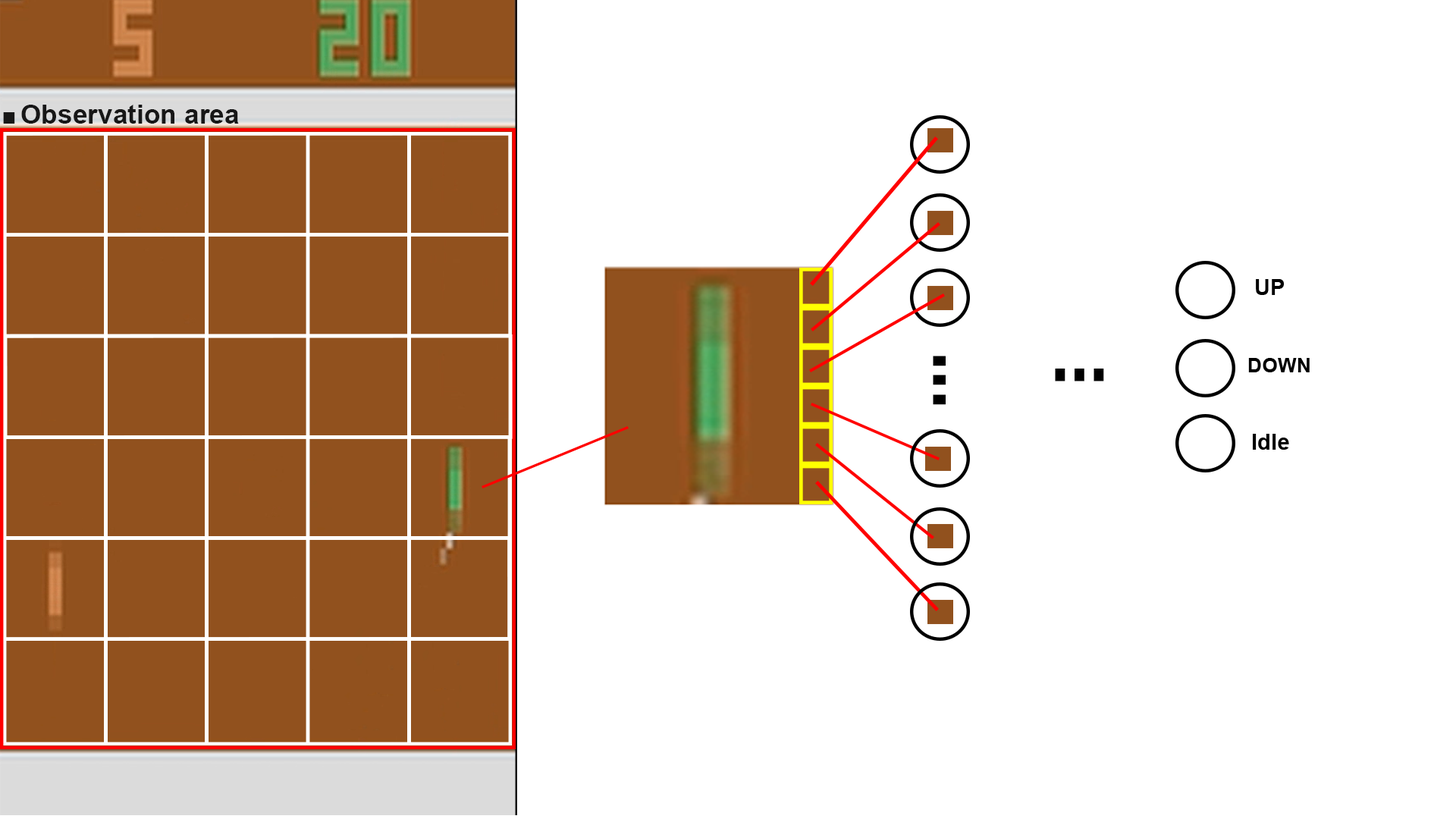
<style>
.page{position:relative;width:1456px;height:819px;background:#ffffff}
.page>*{position:absolute;margin:0}
.t1{font:26.8px "Arial-BoldMT";color:#171717}
.t2{font:80.4px "Arial-BoldMT";color:#171717}
.t3{font:22.3px "Arial-BoldMT";color:#000000}
.t4{font:91px "Arial-BoldMT";color:#000000;scale:0.77 1}
.t5{font:20.1px "Arial-BoldMT";color:#000000}
.t6{font:90.8px "Arial-BoldMT";color:#000000;scale:0.77 1}
</style>
<div class="page">
<p class="t1" style="left:3px;top:105px;width:236px;height:19px"><span class="t2">.</span>Observation area</p>
<p class="t3" style="left:1256px;top:279px;width:28px;height:16px">UP</p>
<p class="t4" style="left:933px;top:356px;width:13px;height:49px;rotate:90deg">...</p>
<p class="t5" style="left:1248px;top:358px;width:62px;height:14px">DOWN</p>
<p class="t6" style="left:1055px;top:369px;width:49px;height:12px;rotate:180deg">...</p>
<p class="t3" style="left:1253px;top:434px;width:36px;height:16px">Idle</p>
</div>
